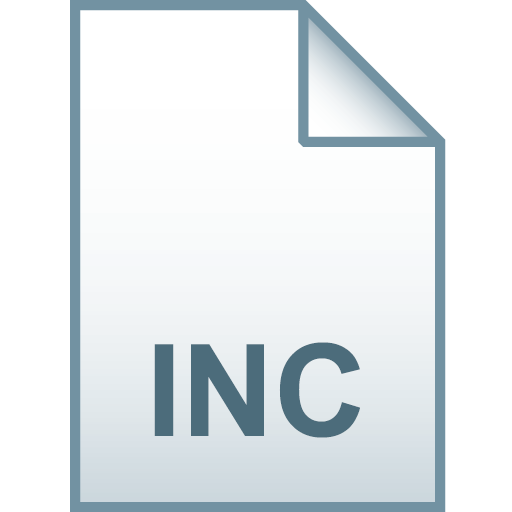
<style>
.page{position:relative;width:512px;height:512px;background:#ffffff}
.page>*{position:absolute;margin:0}
.t1{font:128px "Arial-BoldMT";color:#4c6c7b}
</style>
<div class="page">
<p class="t1" style="left:154px;top:342px;width:206px;height:96px">INC</p>
</div>
